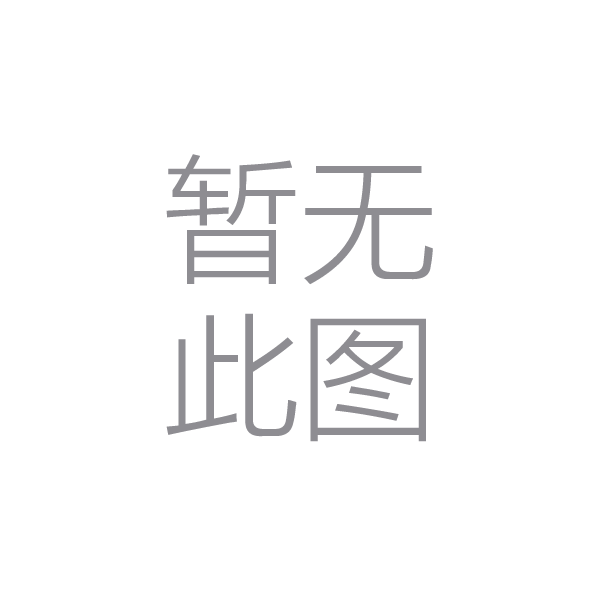
<style>
.page{position:relative;width:600px;height:600px;background:#ffffff}
.page>*{position:absolute;margin:0}
.t1{font:136.8px/158.8px "FZLTXHK--GBK1-0";color:#8e8d92}
</style>
<div class="page">
<p class="t1" style="left:166px;top:154px;width:267px;height:288px;text-align:center">暂无<br>此图</p>
</div>
